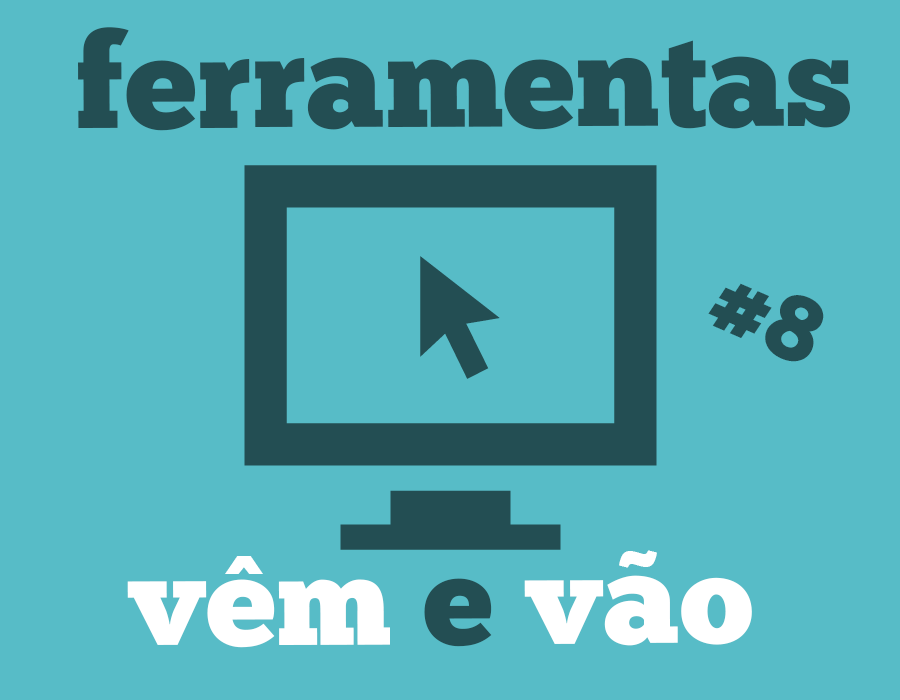
<style>
.page{position:relative;width:900px;height:700px;background:#57bcc7}
.page>*{position:absolute;margin:0}
.t1{font:131px "ChunkFive-Roman";color:#234e53}
.t2{font:92.1px "ChunkFive-Roman";color:#234e53}
.t3{font:89px "GothamUltra";color:#ffffff}
.t4{font:127px "ChunkFive-Roman";color:#ffffff}
.t5{font:127px "ChunkFive-Roman";color:#234e53}
</style>
<div class="page">
<p class="t1" style="left:78px;top:27px;width:772px;height:104px">ferramentas</p>
<p class="t2" style="left:708px;top:283px;width:116px;height:79px;rotate:24deg">#8</p>
<p class="t3" style="left:225px;top:556px;width:38px;height:18px">^</p>
<p class="t3" style="left:619px;top:550px;width:38px;height:18px">~</p>
<p class="t4" style="left:127px;top:575px;width:625px;height:73px">vem <span class="t5">e</span> vao</p>
</div>
